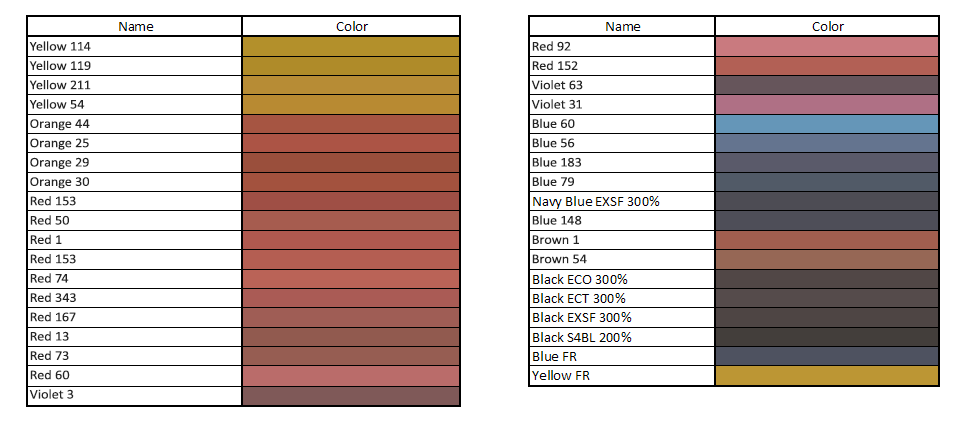
<style>
.page{position:relative;width:960px;height:425px;background:#ffffff}
.page>*{position:absolute;margin:0}
.t1{font:13.3px/19.3px "Calibri";color:#242424;scale:1.07 1}
</style>
<div class="page">
<p class="t1" style="left:29px;top:41px;width:62px;height:358px">Yellow 114<br>Yellow 119<br>Yellow 211<br>Yellow 54<br>Orange 44<br>Orange 25<br>Orange 29<br>Orange 30<br>Red 153<br>Red 50<br>Red 1<br>Red 153<br>Red 74<br>Red 343<br>Red 167<br>Red 13<br>Red 73<br>Red 60<br>Violet 3</p>
<p class="t1" style="left:531px;top:41px;width:56px;height:223px">Red 92<br>Red 152<br>Violet 63<br>Violet 31<br>Blue 60<br>Blue 56<br>Blue 183<br>Blue 79<br><br>Blue 148<br>Brown 1<br>Brown 54</p>
</div>
